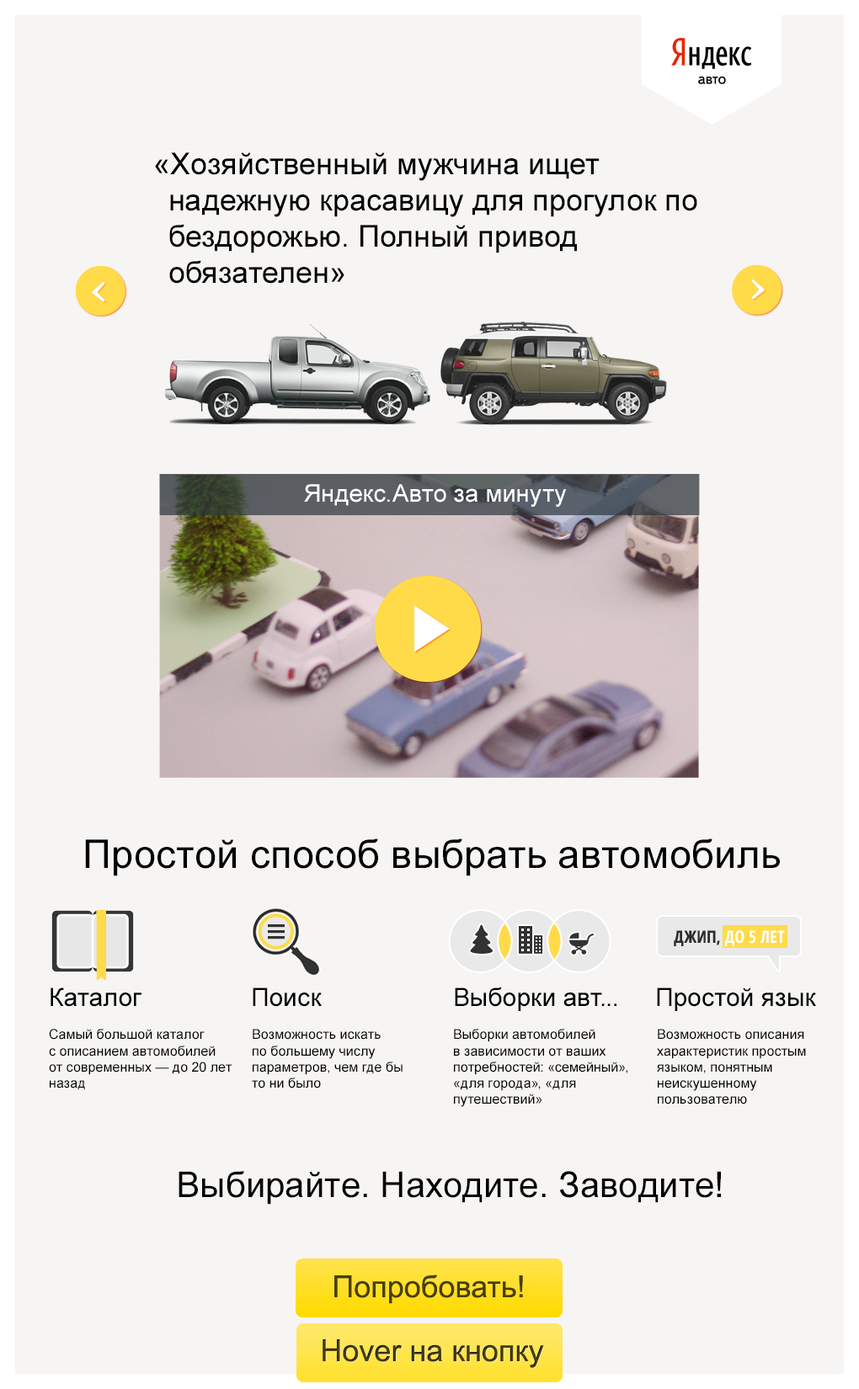
<style>
.page{position:relative;width:859px;height:1389px;background:#f6f5f3}
.page>*{position:absolute;margin:0}
.t1{font:30.3px "ArialMT";color:#000000}
.t2{font:24.4px "ArialMT";color:#ffffff}
.t3{font:39.6px "ArialMT";color:#000000}
.t4{font:25.3px "ArialMT";color:#000000}
.t5{font:13.5px "ArialMT";color:#000000}
.t6{font:35.4px "ArialMT";color:#000000}
.t7{font:30.3px "ArialMT";color:#473e0a}
.t8{font:30.3px "ArialMT";color:#473f14}
</style>
<div class="page">
<p class="t1" style="left:155px;top:152px;width:542px;height:132px">«Хозяйственный мужчина ищет надежную красавицу для прогулок по бездорожью. Полный привод обязателен»</p>
<p class="t2" style="left:304px;top:484px;width:262px;height:23px">Яндекс.Авто за минуту</p>
<p class="t3" style="left:85px;top:838px;width:694px;height:38px">Простой способ выбрать автомобиль</p>
<p class="t4" style="left:51px;top:987px;width:90px;height:20px">Каталог</p>
<p class="t4" style="left:253px;top:987px;width:69px;height:20px">Поиск</p>
<p class="t4" style="left:455px;top:987px;width:161px;height:24px">Выборки авт...</p>
<p class="t4" style="left:657px;top:987px;width:159px;height:24px">Простой язык</p>
<p class="t5" style="left:49px;top:1029px;width:183px;height:61px">Самый большой каталог<br>с описанием автомобилей<br>от современных — до 20 лет назад</p>
<p class="t5" style="left:252px;top:1029px;width:150px;height:59px">Возможность искать<br>по большему числу параметров, чем где бы<br>то ни было</p>
<p class="t5" style="left:454px;top:1029px;width:173px;height:78px">Выборки автомобилей<br>в зависимости от ваших потребностей: «семейный», «для города», «для путешествий»</p>
<p class="t5" style="left:657px;top:1029px;width:149px;height:75px">Возможность описания характеристик простым языком, понятным неискушенному пользователю</p>
<p class="t6" style="left:178px;top:1171px;width:543px;height:34px">Выбирайте. Находите. Заводите!</p>
<p class="t7" style="left:334px;top:1274px;width:189px;height:30px">Попробовать!</p>
<p class="t8" style="left:322px;top:1339px;width:222px;height:29px">Hover на кнопку</p>
</div>
